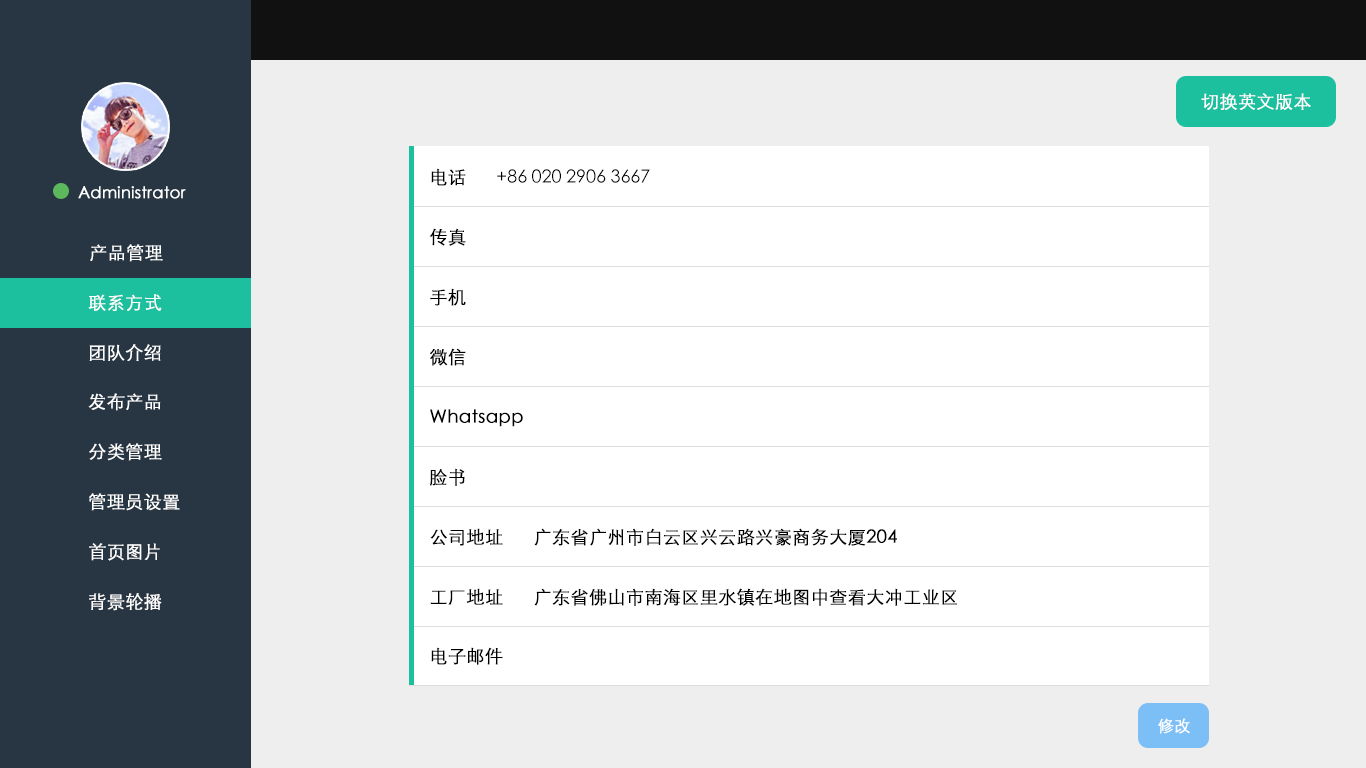
<style>
.page{position:relative;width:1366px;height:768px;background:#ffffff}
.page>*{position:absolute;margin:0}
.t1{font:18px "STXihei";color:#ffffff;font-weight:bold}
.t2{font:18px "STXihei";color:#000000}
.t3{font:18px "STXihei";color:#000000;font-weight:bold}
.t4{font:16px "STXihei";color:#ffffff;font-weight:bold}
</style>
<div class="page">
<p class="t1" style="left:1201px;top:93px;width:110px;height:17px">切换英文版本</p>
<p class="t2" style="left:431px;top:168px;width:219px;height:18px"><span class="t3">电话      </span>+86 020 2906 3667</p>
<p class="t4" style="left:78px;top:186px;width:108px;height:13px">Administrator</p>
<p class="t3" style="left:429px;top:228px;width:37px;height:18px">传真</p>
<p class="t1" style="left:90px;top:244px;width:73px;height:18px">产品管理</p>
<p class="t1" style="left:88px;top:294px;width:74px;height:17px">联系方式</p>
<p class="t3" style="left:430px;top:288px;width:36px;height:18px">手机</p>
<p class="t1" style="left:89px;top:344px;width:72px;height:17px">团队介绍</p>
<p class="t3" style="left:430px;top:348px;width:36px;height:18px">微信</p>
<p class="t1" style="left:88px;top:393px;width:73px;height:18px">发布产品</p>
<p class="t3" style="left:430px;top:409px;width:93px;height:18px">Whatsapp</p>
<p class="t1" style="left:89px;top:443px;width:73px;height:18px">分类管理</p>
<p class="t3" style="left:429px;top:468px;width:36px;height:18px">脸书</p>
<p class="t1" style="left:89px;top:493px;width:91px;height:18px">管理员设置</p>
<p class="t3" style="left:430px;top:528px;width:467px;height:18px">公司地址      广东省广州市白云区兴云路兴豪商务大厦204</p>
<p class="t1" style="left:89px;top:543px;width:71px;height:18px">首页图片</p>
<p class="t1" style="left:89px;top:593px;width:73px;height:18px">背景轮播</p>
<p class="t3" style="left:430px;top:588px;width:527px;height:18px">工厂地址      广东省佛山市南海区里水镇在地图中查看大冲工业区</p>
<p class="t3" style="left:431px;top:647px;width:72px;height:18px">电子邮件</p>
<p class="t4" style="left:1158px;top:718px;width:32px;height:16px">修改</p>
</div>
